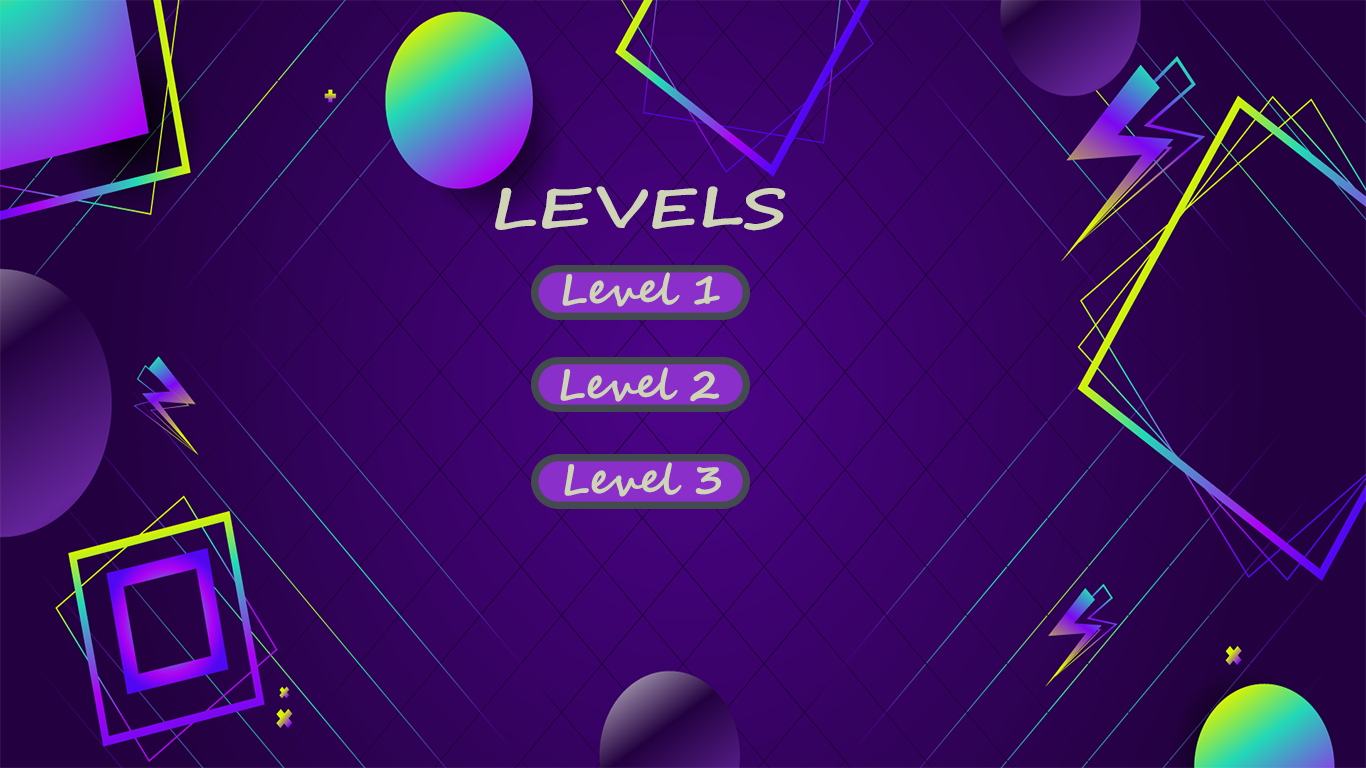
<style>
.page{position:relative;width:1366px;height:768px}
.page>*{position:absolute;margin:0}
.t1{font:55.4px "SegoeScript-Bold";color:#ced4b5;scale:1.28 1}
.t2{font:41.7px "SegoeScript-Bold";color:#ced4b5}
</style>
<div class="page">
<p class="t1" style="left:495px;top:186px;width:291px;height:45px">LEVELS</p>
<p class="t2" style="left:562px;top:272px;width:158px;height:35px">Level 1</p>
<p class="t2" style="left:560px;top:367px;width:160px;height:35px">Level 2</p>
<p class="t2" style="left:564px;top:462px;width:157px;height:35px">Level 3</p>
</div>
